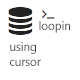
<style>
.page{position:relative;width:80px;height:80px;background:#ffffff}
.page>*{position:absolute;margin:0}
.t1{font:12px/12px "SegoeUI";color:#424242;scale:0.95 1}
.t2{font:12px "SegoeUI";color:#424242;scale:0.95 1}
</style>
<div class="page">
<p class="t1" style="left:39px;top:9px;width:31px;height:24px">&lt;/&gt;<br>loopin</p>
<p class="t2" style="left:10px;top:42px;width:26px;height:12px">using</p>
<p class="t2" style="left:10px;top:59px;width:31px;height:7px">cursor</p>
</div>
